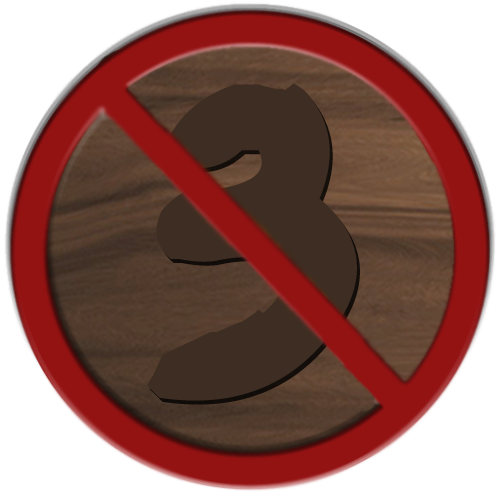
<style>
.page{position:relative;width:500px;height:500px;background:#ffffff}
.page>*{position:absolute;margin:0}
.t1{font:340px "Ninja-Naruto";letter-spacing:-0.12em;color:#3e2d22;font-weight:bold}
</style>
<div class="page">
<p class="t1" style="left:147px;top:83px;width:210px;height:318px">3</p>
</div>
